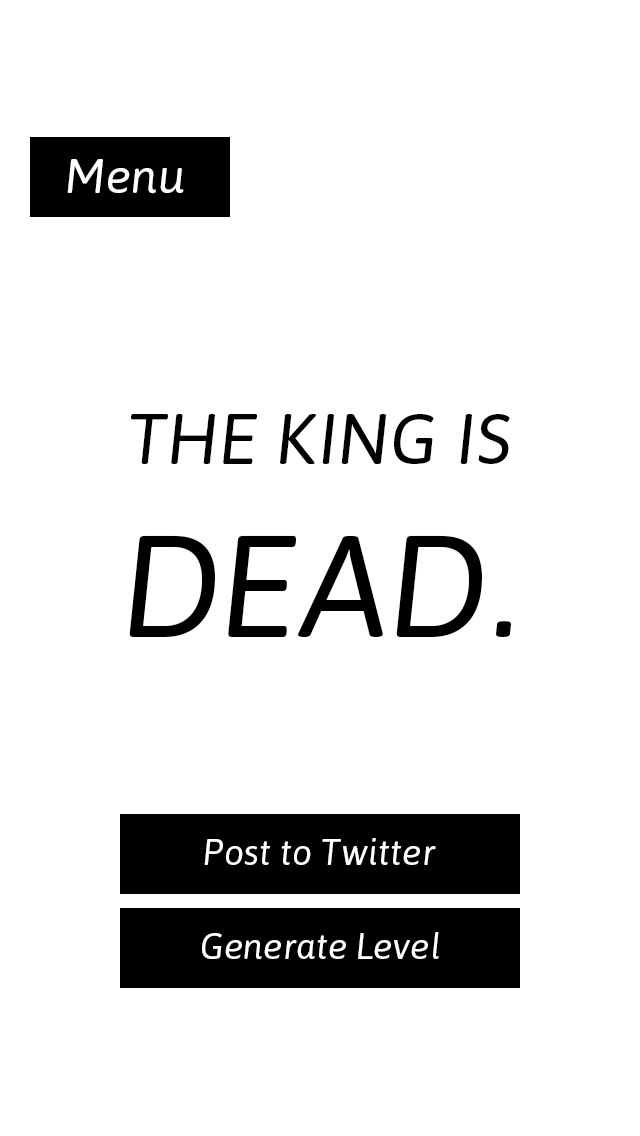
<style>
.page{position:relative;width:640px;height:1136px;background:#ffffff}
.page>*{position:absolute;margin:0}
.t1{font:48px "Asap-Italic";color:#ffffff}
.t2{font:72px "Asap-Italic";color:#000000}
.t3{font:144px "Asap-Italic";color:#000000}
.t4{font:36px "Asap-Italic";color:#ffffff}
</style>
<div class="page">
<p class="t1" style="left:67px;top:159px;width:117px;height:35px">Menu</p>
<p class="t2" style="left:129px;top:414px;width:382px;height:223px;text-align:center">THE KING IS<br><span class="t3">DEAD.</span></p>
<p class="t4" style="left:204px;top:838px;width:232px;height:27px">Post to Twitter</p>
</div>
